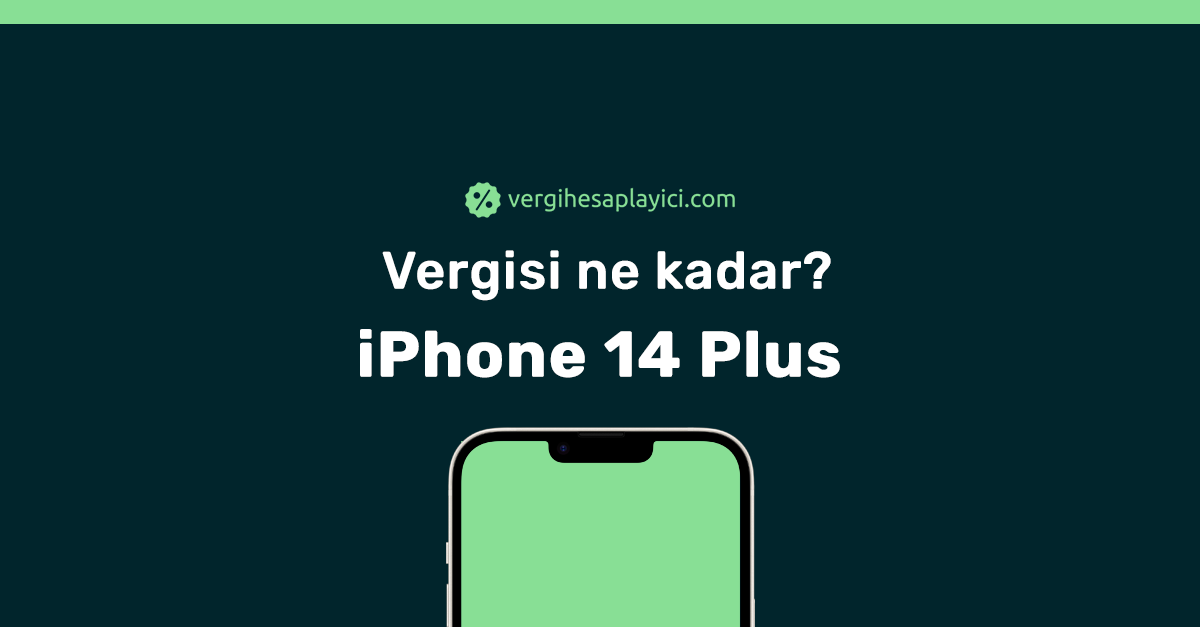
<style>
.page{position:relative;width:1200px;height:627px;background:#01252c}
.page>*{position:absolute;margin:0}
.t1{font:52px/88px "Rubik-Medium";color:#ffffff;font-weight:bold}
.t2{font:64px/88px "Rubik-Bold";color:#ffffff;font-weight:bold}
</style>
<div class="page">
<p class="t1" style="left:360px;top:250px;width:480px;height:128px;text-align:center">Vergisi ne kadar?<br><span class="t2">iPhone 14 Plus</span></p>
</div>
